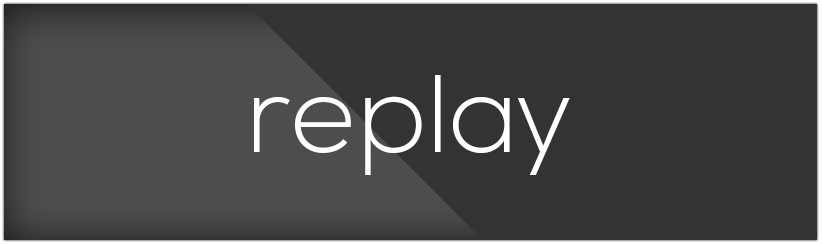
<style>
.page{position:relative;width:822px;height:244px;background:#333333}
.page>*{position:absolute;margin:0}
.t1{font:110.1px "NexaLight";color:#ffffff}
</style>
<div class="page">
<p class="t1" style="left:254px;top:75px;width:316px;height:100px">replay</p>
</div>
